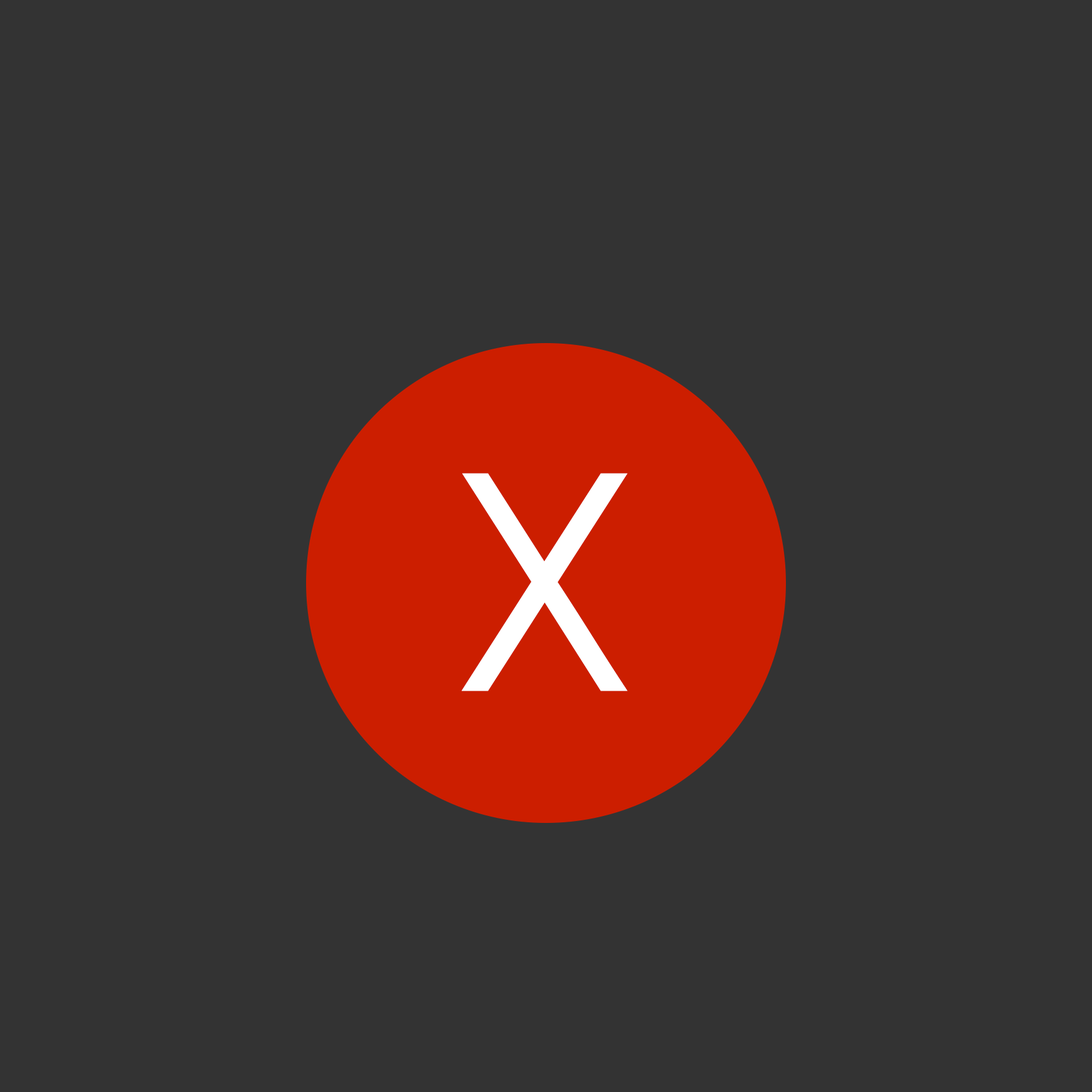
<style>
.page{position:relative;width:1092px;height:1092px;background:#333333}
.page>*{position:absolute;margin:0}
.t1{font:287.5px "SinhalaSangamMN";color:#ffffff}
</style>
<div class="page">
<p class="t1" style="left:462px;top:473px;width:166px;height:218px">X</p>
</div>
